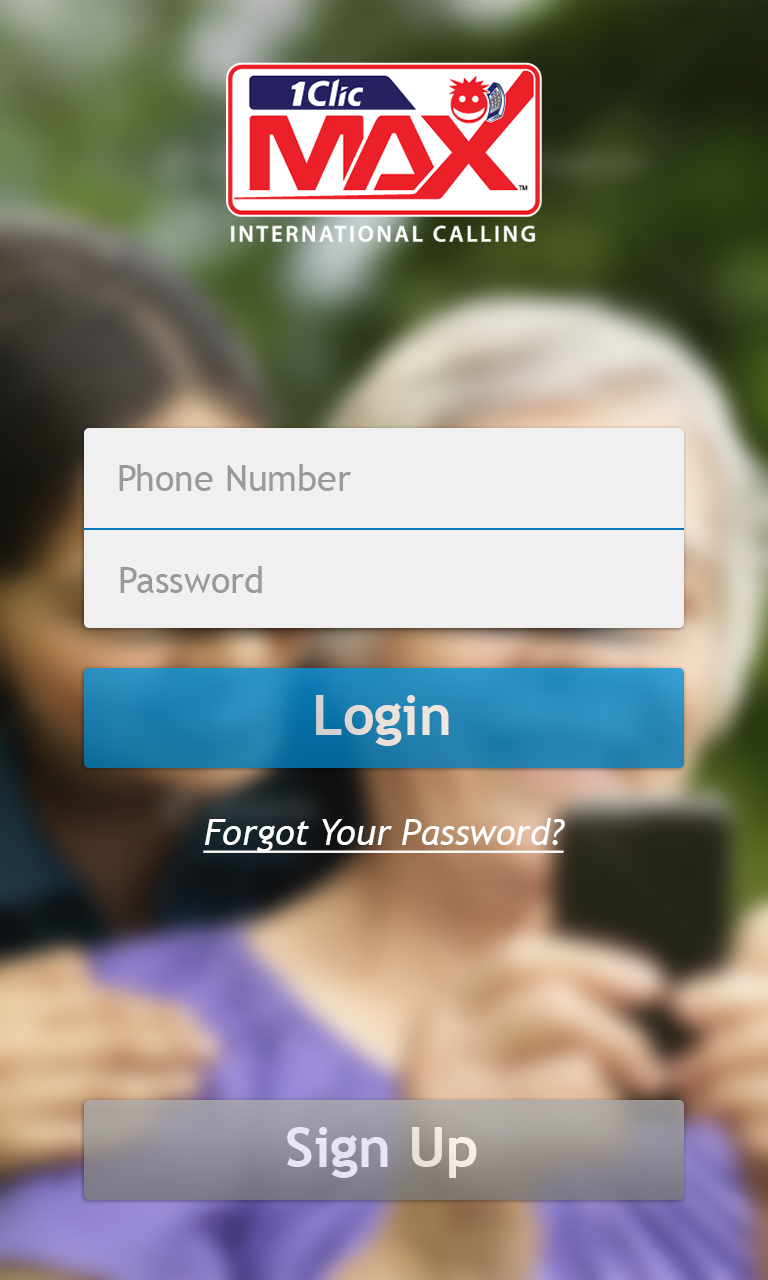
<style>
.page{position:relative;width:768px;height:1280px}
.page>*{position:absolute;margin:0}
.t1{font:36px "TrebuchetMS";color:#999999}
.t2{font:56px "TrebuchetMS-Bold";color:#e9e0da}
.t3{font:36px "TrebuchetMS-Italic";color:#ffffff;text-decoration:underline}
.t4{font:56px "TrebuchetMS-Bold";color:#e9e5f2}
</style>
<div class="page">
<p class="t1" style="left:119px;top:464px;width:232px;height:27px">Phone Number</p>
<p class="t1" style="left:120px;top:566px;width:142px;height:27px">Password</p>
<p class="t2" style="left:316px;top:695px;width:133px;height:51px">Login</p>
<p class="t3" style="left:203px;top:818px;width:362px;height:35px">Forgot Your Password?</p>
<p class="t4" style="left:287px;top:1127px;width:190px;height:51px">Sign Up</p>
</div>
